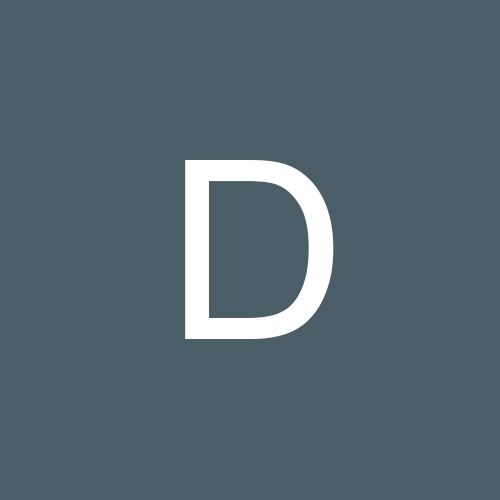
<style>
.page{position:relative;width:500px;height:500px;background:#4b5d67}
.page>*{position:absolute;margin:0}
.t1{font:250px "ArialMT";color:#ffffff}
</style>
<div class="page">
<p class="t1" style="left:185px;top:160px;width:149px;height:179px">D</p>
</div>
